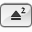
<style>
.page{position:relative;width:32px;height:32px;background:#fcfcfc}
.page>*{position:absolute;margin:0}
.t1{font:8px "Papyrus"}
</style>
<div class="page">
<p class="t1" style="left:21px;top:7px;width:5px;height:7px">2</p>
</div>
